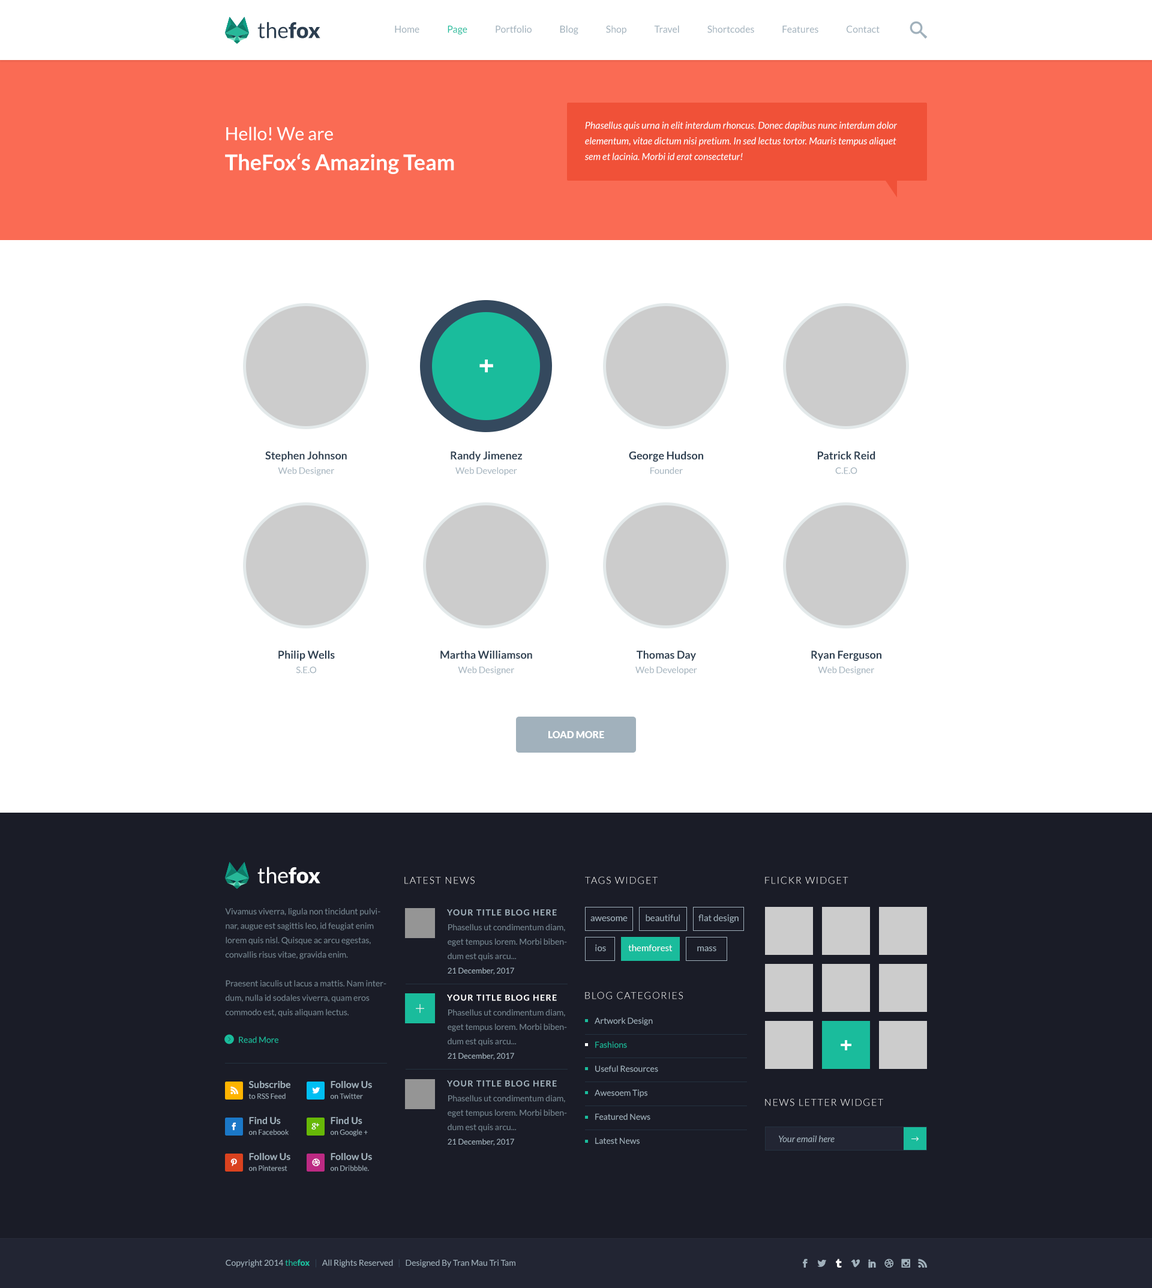
<style>
.page{position:relative;width:1152px;height:1288px;background:#ffffff}
.page>*{position:absolute;margin:0}
.t1{font:21.6px "Lato-Regular";color:#2c3e50}
.t2{font:21.6px "Lato-Black";color:#2c3e50}
.t3{font:9.6px "Lato-Regular";color:#a1b1bc}
.t4{font:9.6px "Lato-Regular";color:#1abc9c}
.t5{font:9.6px/15.6px "Lato-Italic";color:#ffffff}
.t6{font:21.6px/30px "Lato-Bold";color:#ffffff}
.t7{font:18px/30px "Lato-Regular";color:#ffffff}
.t8{font:36px "Cabin-Regular";color:#ffffff}
.t9{font:10.8px/14.4px "Lato-Bold";color:#2c3e50}
.t10{font:9px/14.4px "Lato-Regular";color:#a1b1bc}
.t11{font:9.6px "Lato-Black";color:#ffffff}
.t12{font:21.6px "Lato-Regular";color:#ffffff}
.t13{font:21.6px "Lato-Black";color:#ffffff}
.t14{font:9.6px "Lato-Light";letter-spacing:0.1em;color:#ffffff;text-transform:uppercase}
.t15{font:9.6px "Lato-Light";letter-spacing:0.1em;text-transform:uppercase}
.t16{font:8.4px/14.4px "Lato-Regular";color:#758590}
.t17{font:8.4px "Lato-Bold";letter-spacing:0.1em;color:#a1b1bc;text-transform:uppercase}
.t18{font:9px "Lato-Regular";color:#a1b1bc}
.t19{font:7.8px/14.4px "Lato-Regular";color:#a1b1bc}
.t20{font:9px "Lato-Regular";color:#ffffff}
.t21{font:8.4px "Lato-Bold";letter-spacing:0.1em;color:#ffffff;text-transform:uppercase}
.t22{font:18px "Lato-Light";color:#ffffff}
.t23{font:8.4px/24px "Lato-Regular";color:#a1b1bc}
.t24{font:8.4px/24px "Lato-Regular";color:#1abc9c}
.t25{font:8.4px "Lato-Regular";color:#1abc9c}
.t26{font:28.8px "Cabin-Regular";color:#ffffff}
.t27{font:7.2px/10.8px "Lato-Regular";color:#a1b1bc}
.t28{font:9.6px/10.8px "Lato-Bold";color:#a1b1bc}
.t29{font:9px "Lato-Italic";color:#a1b1bc}
.t30{font:8.4px "Lato-Regular";color:#a1b1bc}
.t31{font:8.4px "Lato-Black";color:#1abc9c}
.t32{font:8.4px "Lato-Regular";color:#304253}
</style>
<div class="page">
<p class="t1" style="left:257px;top:22px;width:63px;height:16px">the<span class="t2">fox</span></p>
<p class="t3" style="left:395px;top:25px;width:485px;height:10px">Home               <span class="t4">Page</span>               Portfolio               Blog               Shop               Travel               Shortcodes               Features               Contact</p>
<p class="t5" style="left:585px;top:121px;width:312px;height:39px">Phasellus quis urna in elit interdum rhoncus. Donec dapibus nunc interdum dolor elementum, vitae dictum nisi pretium. In sed lectus tortor. Mauris tempus aliquet sem et lacinia. Morbi id erat consectetur!</p>
<p class="t6" style="left:225px;top:127px;width:229px;height:47px"><span class="t7">Hello! We are<br></span>TheFox‘s Amazing Team</p>
<p class="t8" style="left:479px;top:359px;width:14px;height:14px">+</p>
<p class="t9" style="left:265px;top:451px;width:82px;height:24px;text-align:center">Stephen Johnson<br><span class="t10">Web Designer</span></p>
<p class="t9" style="left:451px;top:451px;width:71px;height:24px;text-align:center">Randy Jimenez<br><span class="t10">Web Developer</span></p>
<p class="t9" style="left:629px;top:451px;width:74px;height:23px;text-align:center">George Hudson<br><span class="t10">Founder</span></p>
<p class="t9" style="left:818px;top:451px;width:57px;height:23px;text-align:center">Patrick Reid<br><span class="t10">C.E.O</span></p>
<p class="t9" style="left:278px;top:650px;width:57px;height:23px;text-align:center">Philip Wells<br><span class="t10">S.E.O</span></p>
<p class="t9" style="left:440px;top:650px;width:92px;height:24px;text-align:center">Martha Williamson<br><span class="t10">Web Designer</span></p>
<p class="t10" style="left:635px;top:650px;width:62px;height:24px;text-align:center"><span class="t9">Thomas Day<br></span>Web Developer</p>
<p class="t9" style="left:811px;top:650px;width:70px;height:24px;text-align:center">Ryan Ferguson<br><span class="t10">Web Designer</span></p>
<p class="t11" style="left:548px;top:731px;width:56px;height:7px">LOAD MORE</p>
<p class="t12" style="left:257px;top:866px;width:63px;height:17px">the<span class="t13">fox</span></p>
<p class="t14" style="left:404px;top:876px;width:71px;height:8px">Latest News</p>
<p class="t14" style="left:585px;top:876px;width:73px;height:8px">Tags Widget</p>
<p class="t15" style="left:765px;top:876px;width:83px;height:8px">Flickr Widget</p>
<p class="t16" style="left:225px;top:908px;width:161px;height:108px">Vivamus viverra, ligula non tincidunt pulvinar, augue est sagittis leo, id feugiat enim lorem quis nisl. Quisque ac arcu egestas, convallis risus vitae, gravida enim. <br><br>Praesent iaculis ut lacus a mattis. Nam interdum, nulla id sodales viverra, quam eros commodo est, quis aliquam lectus.</p>
<p class="t17" style="left:447px;top:909px;width:110px;height:7px">Your Title Blog Here</p>
<p class="t18" style="left:590px;top:916px;width:38px;height:5px">awesome</p>
<p class="t18" style="left:646px;top:914px;width:34px;height:7px">beautiful</p>
<p class="t18" style="left:698px;top:914px;width:41px;height:9px">flat design</p>
<p class="t16" style="left:448px;top:923px;width:119px;height:51px">Phasellus ut condimentum diam, eget tempus lorem. Morbi bibendum est quis arcu...<br><span class="t19">21 December, 2017</span></p>
<p class="t18" style="left:595px;top:944px;width:11px;height:7px">ios</p>
<p class="t20" style="left:628px;top:944px;width:45px;height:7px">themforest</p>
<p class="t18" style="left:697px;top:946px;width:19px;height:5px">mass</p>
<p class="t21" style="left:447px;top:994px;width:110px;height:7px">Your Title Blog Here</p>
<p class="t14" style="left:585px;top:991px;width:98px;height:8px">Blog Categories</p>
<p class="t22" style="left:416px;top:1004px;width:8px;height:9px">+</p>
<p class="t16" style="left:448px;top:1009px;width:119px;height:51px">Phasellus ut condimentum diam, eget tempus lorem. Morbi bibendum est quis arcu...<br><span class="t19">21 December, 2017</span></p>
<p class="t23" style="left:595px;top:1017px;width:63px;height:127px">Artwork Design<br><span class="t24">Fashions<br></span>Useful Resources<br>Awesoem Tips<br>Featured News<br>Latest News</p>
<p class="t25" style="left:239px;top:1036px;width:39px;height:7px">Read More</p>
<p class="t26" style="left:841px;top:1040px;width:10px;height:10px">+</p>
<p class="t27" style="left:248px;top:1081px;width:42px;height:18px"><span class="t28">Subscribe<br></span>to RSS Feed</p>
<p class="t27" style="left:331px;top:1081px;width:41px;height:18px"><span class="t28">Follow Us<br></span>on Twitter</p>
<p class="t17" style="left:447px;top:1080px;width:110px;height:7px">Your Title Blog Here</p>
<p class="t16" style="left:448px;top:1094px;width:119px;height:51px">Phasellus ut condimentum diam, eget tempus lorem. Morbi bibendum est quis arcu...<br><span class="t19">21 December, 2017</span></p>
<p class="t14" style="left:765px;top:1098px;width:118px;height:8px">news letter widget</p>
<p class="t27" style="left:249px;top:1117px;width:40px;height:18px"><span class="t28">Find Us<br></span>on Facebook</p>
<p class="t27" style="left:331px;top:1117px;width:37px;height:19px"><span class="t28">Find Us<br></span>on Google +</p>
<p class="t29" style="left:779px;top:1135px;width:56px;height:7px">Your email here</p>
<p class="t27" style="left:249px;top:1153px;width:41px;height:18px"><span class="t28">Follow Us<br></span>on Pinterest</p>
<p class="t27" style="left:331px;top:1153px;width:41px;height:18px"><span class="t28">Follow Us<br></span>on Dribbble.</p>
<p class="t30" style="left:226px;top:1259px;width:289px;height:8px">Copyright 2014 <span class="t25">the</span><span class="t31">fox</span><span class="t32">   |   </span>All Rights Reserved<span class="t32">   |   </span>Designed By Tran Mau Tri Tam</p>
</div>
